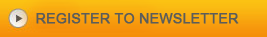
<style>
.page{position:relative;width:267px;height:37px}
.page>*{position:absolute;margin:0}
.t1{font:14px "ArialMT";color:#5b5d5b;font-weight:bold}
</style>
<div class="page">
<p class="t1" style="left:36px;top:13px;width:203px;height:11px">REGISTER TO NEWSLETTER</p>
</div>
